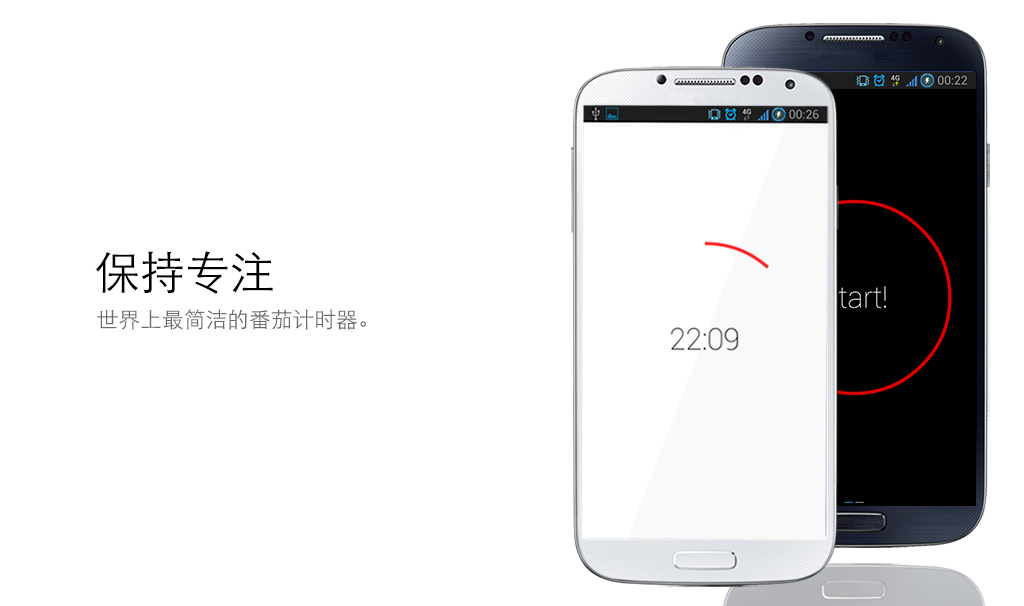
<style>
.page{position:relative;width:1024px;height:606px;background:#ffffff}
.page>*{position:absolute;margin:0}
.t1{font:45.1px "STXihei";color:#000000}
.t2{font:21.8px "STXihei";color:#6c6c6c}
</style>
<div class="page">
<p class="t1" style="left:95px;top:251px;width:178px;height:43px">保持专注</p>
<p class="t2" style="left:97px;top:309px;width:269px;height:21px">世界上最简洁的番茄计时器。</p>
</div>
